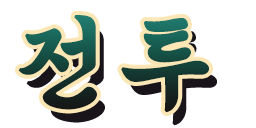
<style>
.page{position:relative;width:256px;height:128px;background:#ffffff}
.page>*{position:absolute;margin:0}
.t1{font:101.5px "SolmoeKimDaeGeonM";letter-spacing:0.14em;font-weight:bold}
</style>
<div class="page">
<p class="t1" style="left:18px;top:15px;width:191px;height:98px">전투</p>
</div>
